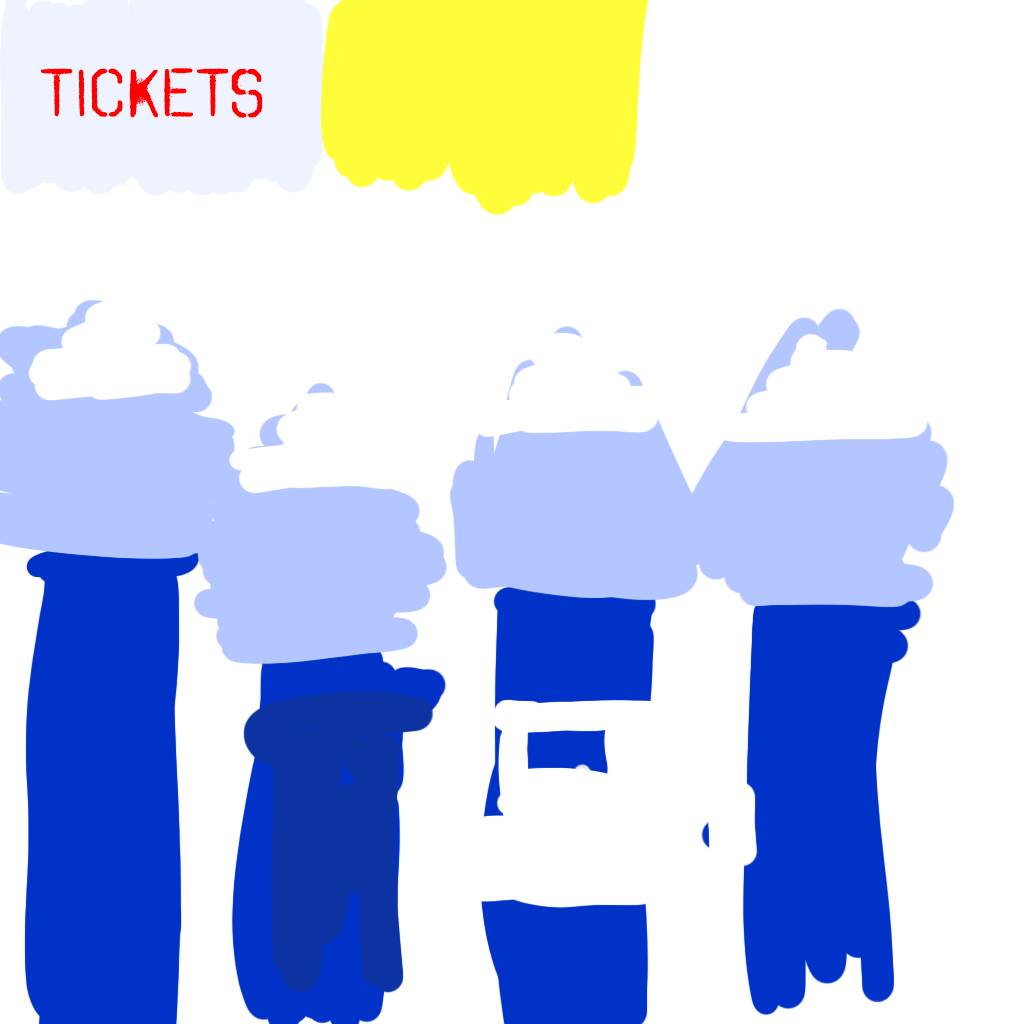
<style>
.page{position:relative;width:1024px;height:1024px;background:#ffffff}
.page>*{position:absolute;margin:0}
.t1{font:70px "OctinSpraypaintFree";color:#ff0000}
</style>
<div class="page">
<p class="t1" style="left:41px;top:68px;width:222px;height:50px">TICKETS</p>
</div>
